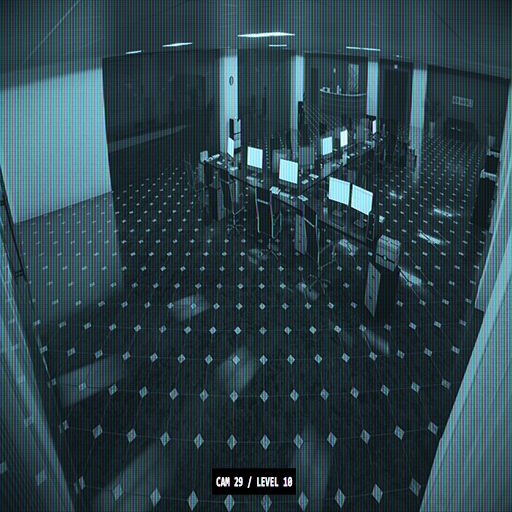
<style>
.page{position:relative;width:512px;height:512px}
.page>*{position:absolute;margin:0}
.t1{font:13.7px "Consolas-Bold";color:#ffffff;font-weight:bold;scale:0.56 1}
</style>
<div class="page">
<p class="t1" style="left:216px;top:476px;width:77px;height:12px">CAM 29 / LEVEL 10</p>
</div>
